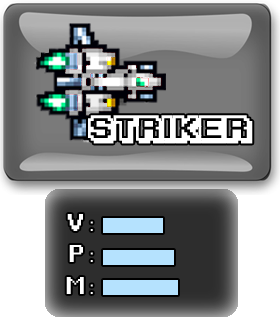
<style>
.page{position:relative;width:280px;height:323px}
.page>*{position:absolute;margin:0}
.t1{font:29px "KarmaticArcade";color:#ffffff}
.t2{font:60px "Game-Over";color:#ffffff}
.t3{font:60px "Game-Over";color:#fefefe}
</style>
<div class="page">
<p class="t1" style="left:88px;top:115px;width:165px;height:29px">Striker</p>
<p class="t2" style="left:67px;top:214px;width:26px;height:17px">V :</p>
<p class="t3" style="left:69px;top:245px;width:24px;height:17px">P :</p>
<p class="t3" style="left:66px;top:277px;width:27px;height:17px">M :</p>
</div>
